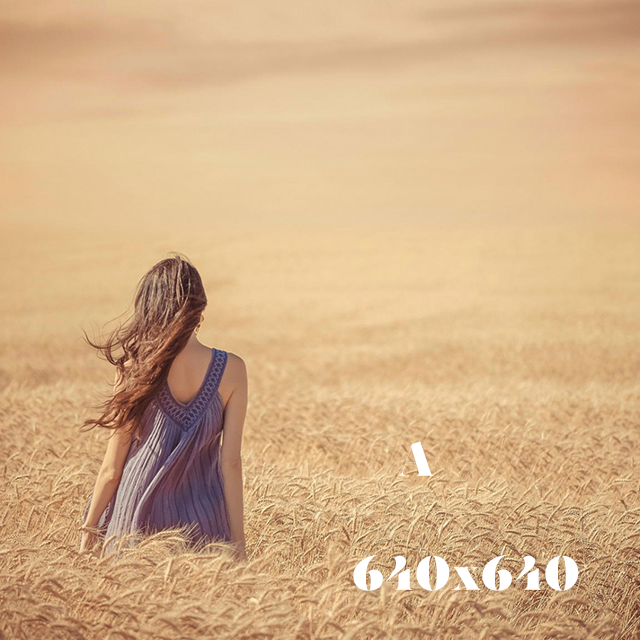
<style>
.page{position:relative;width:640px;height:640px}
.page>*{position:absolute;margin:0}
.t1{font:48px "Salome-Fine";color:#ffffff}
</style>
<div class="page">
<p class="t1" style="left:397px;top:441px;width:38px;height:35px">A</p>
<p class="t1" style="left:353px;top:554px;width:226px;height:37px">640x640</p>
</div>
